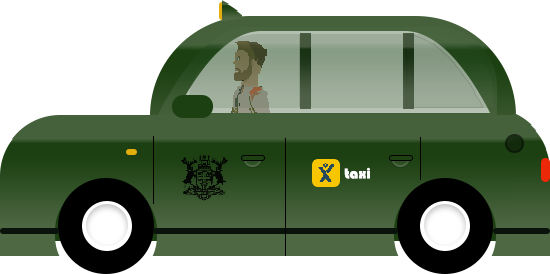
<style>
.page{position:relative;width:550px;height:274px;background:#ffffff}
.page>*{position:absolute;margin:0}
.t1{font:15px "Bauhaus93";color:#ffffff}
</style>
<div class="page">
<p class="t1" style="left:344px;top:167px;width:26px;height:12px">taxi</p>
</div>
